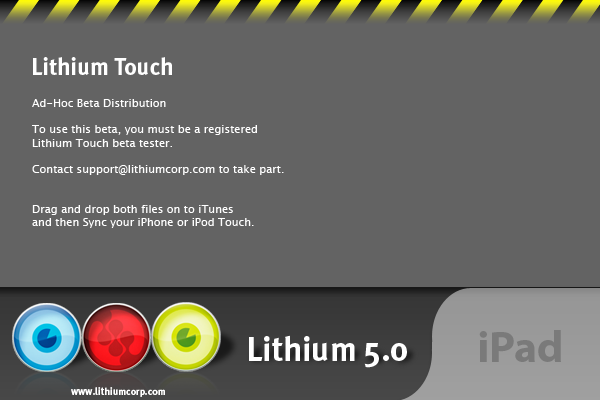
<style>
.page{position:relative;width:600px;height:400px;background:#636363}
.page>*{position:absolute;margin:0}
.t1{font:24px "MetaPlusBold-Roman";color:#ffffff}
.t2{font:11px "LucidaGrande";color:#ffffff}
.t3{font:34px "MetaPlusBold-Roman";color:#ffffff}
.t4{font:44.3px "MyriadPro-Bold";color:#7a7a7a}
.t5{font:10.2px "MetaPlusBold-Roman";color:#ffffff}
</style>
<div class="page">
<p class="t1" style="left:33px;top:57px;width:139px;height:18px">Lithium Touch</p>
<p class="t2" style="left:32px;top:99px;width:252px;height:129px">Ad-Hoc Beta Distribution<br><br>To use this beta, you must be a registered<br>Lithium Touch beta tester.<br><br>Contact support@lithiumcorp.com to take part.<br><br><br>Drag and drop both files on to iTunes<br>and then Sync your iPhone or iPod Touch.</p>
<p class="t3" style="left:249px;top:335px;width:158px;height:33px">Lithium 5.0</p>
<p class="t4" style="left:479px;top:330px;width:82px;height:32px">iPad</p>
<p class="t5" style="left:71px;top:387px;width:94px;height:10px">www.lithiumcorp.com</p>
</div>
